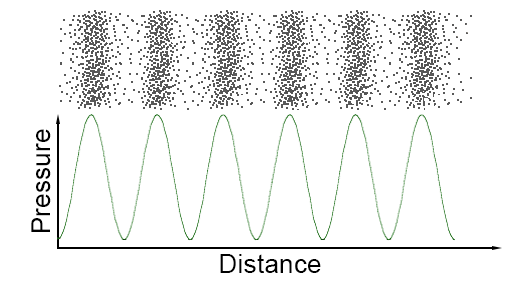
<style>
.page{position:relative;width:510px;height:300px;background:#ffffff}
.page>*{position:absolute;margin:0}
.t1{font:26px "ArialMT";letter-spacing:0.01em;color:#000000}
</style>
<div class="page">
<p class="t1" style="left:31px;top:129px;width:20px;height:103px;rotate:180deg">Pressure</p>
<p class="t1" style="left:220px;top:254px;width:101px;height:19px">Distance</p>
</div>
